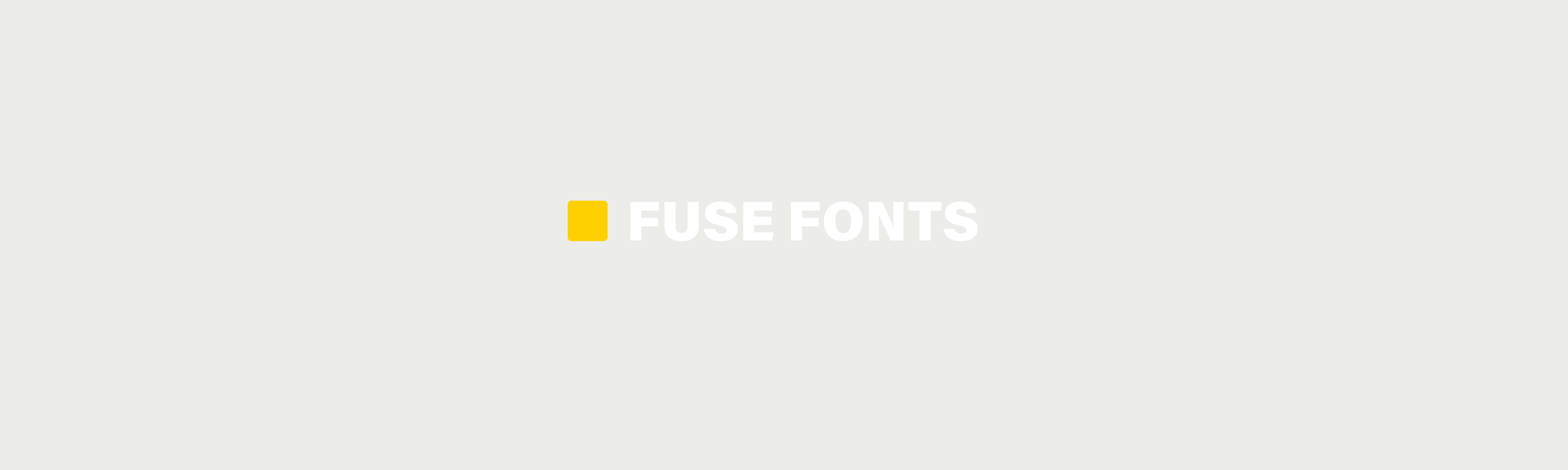
<style>
.page{position:relative;width:1568px;height:470px;background:#ecece9}
.page>*{position:absolute;margin:0}
.t1{font:55.6px "AcuminConcept-Black";color:#ffffff}
</style>
<div class="page">
<p class="t1" style="left:630px;top:201px;width:348px;height:40px">FUSE FONTS</p>
</div>
